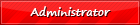
<style>
.page{position:relative;width:140px;height:25px}
.page>*{position:absolute;margin:0}
.t1{font:11px "SegoePrint-Bold";color:#ffffff}
</style>
<div class="page">
<p class="t1" style="left:30px;top:6px;width:81px;height:11px">Administrator</p>
</div>
